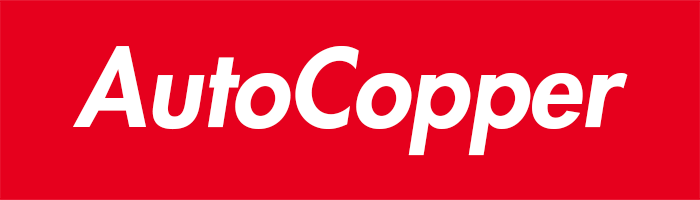
<style>
.page{position:relative;width:700px;height:200px;background:#e6001d}
.page>*{position:absolute;margin:0}
.t1{font:105px "Futura-HeavyOblique";color:#ffffff}
</style>
<div class="page">
<p class="t1" style="left:73px;top:45px;width:555px;height:111px">AutoCopper</p>
</div>
